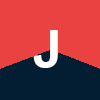
<style>
.page{position:relative;width:100px;height:100px;background:#ea4141}
.page>*{position:absolute;margin:0}
.t1{font:52px "Arial-BoldMT";color:#ffffff}
</style>
<div class="page">
<p class="t1" style="left:33px;top:30px;width:25px;height:38px">J</p>
</div>
